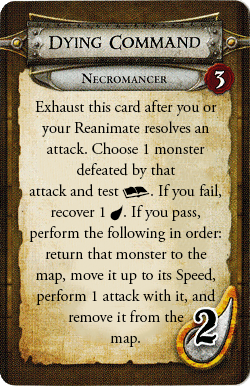
<style>
.page{position:relative;width:250px;height:386px}
.page>*{position:absolute;margin:0}
.t1{font:16px/21px "AGaramondPro-Regular";color:#000000}
.t2{font:12px/21px "DescentSymbols";color:#000000}
.t3{font:16px/21px "DescentSymbols";color:#000000}
</style>
<div class="page">
<p class="t1" style="left:29px;top:100px;width:193px;height:247px;text-align:center">Exhaust this card after you or your Reanimate resolves an attack. Choose 1 monster defeated by that <br>attack and test <span class="t2">c</span>. If you fail, recover 1 <span class="t3">f</span>. If you pass, perform the following in order: return that monster to the map, move it up to its Speed, perform 1 attack with it, and remove it from the <br>map.</p>
</div>
